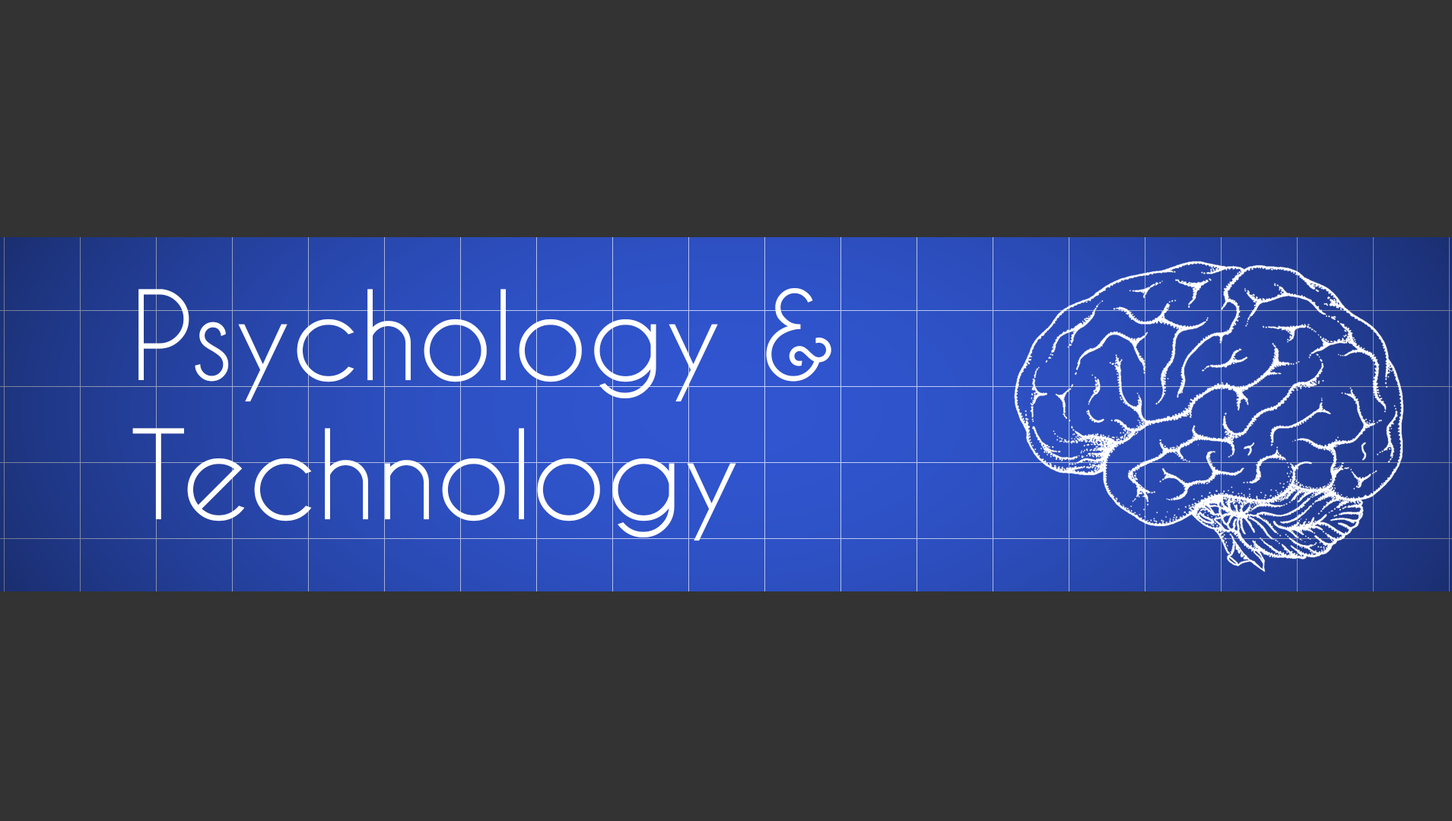
<style>
.page{position:relative;width:1452px;height:821px;background:#333333}
.page>*{position:absolute;margin:0}
.t1{font:116.6px "CaviarDreams";color:#ffffff}
</style>
<div class="page">
<p class="t1" style="left:132px;top:288px;width:699px;height:253px">Psychology &amp; <br>Technology</p>
</div>
